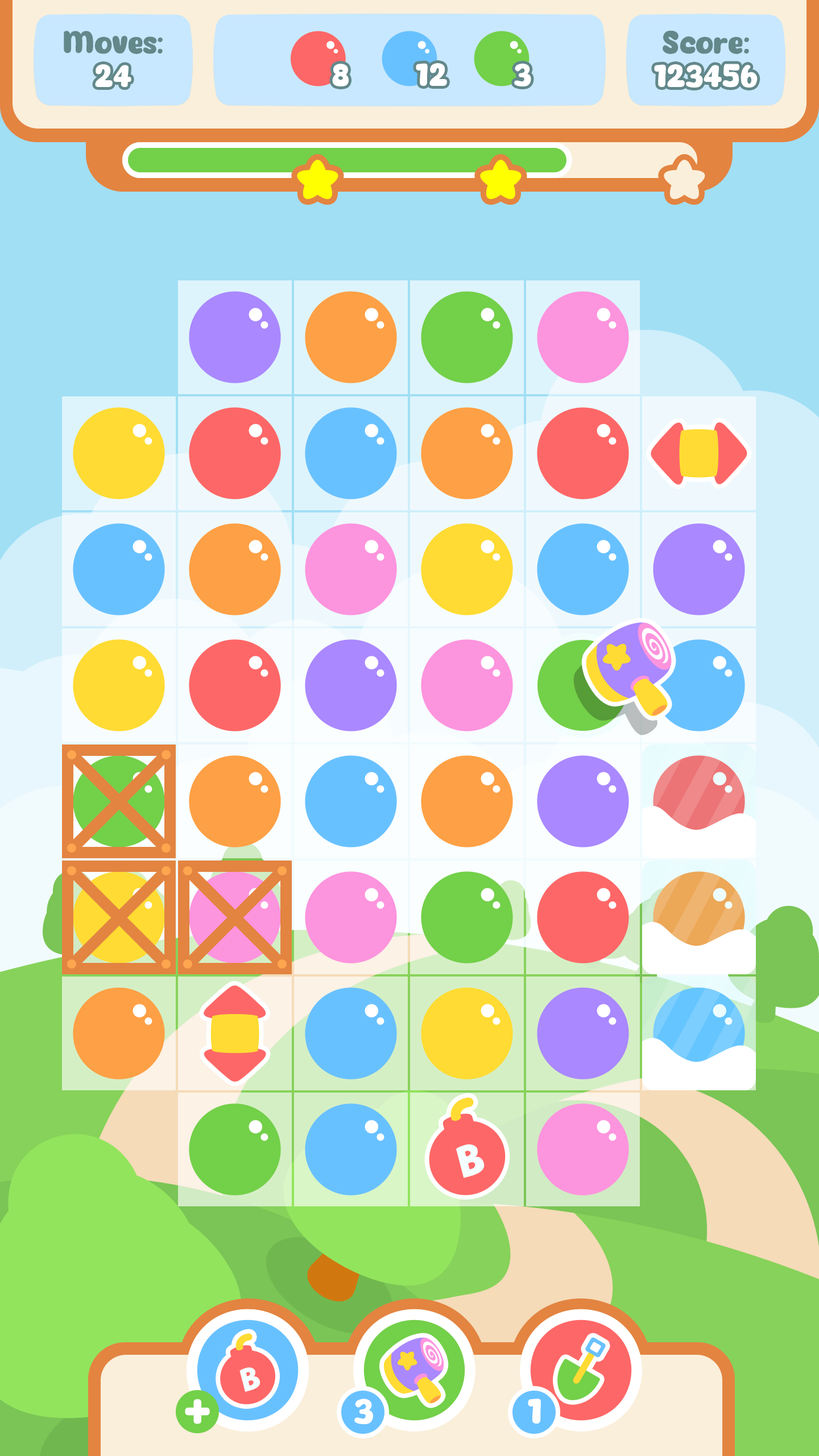
<style>
.page{position:relative;width:819px;height:1456px}
.page>*{position:absolute;margin:0}
.t1{font:30.7px "Eazy-Chat";color:#62888a}
.t2{font:30.7px "Eazy-Chat";color:#ffffff}
.t3{font:34.1px "Eazy-Chat";color:#ffffff}
</style>
<div class="page">
<p class="t1" style="left:64px;top:31px;width:99px;height:23px">Moves:</p>
<p class="t1" style="left:663px;top:31px;width:86px;height:23px">Score:</p>
<p class="t2" style="left:95px;top:64px;width:36px;height:23px">24</p>
<p class="t2" style="left:332px;top:64px;width:17px;height:22px">8</p>
<p class="t2" style="left:416px;top:63px;width:31px;height:23px">12</p>
<p class="t2" style="left:514px;top:63px;width:17px;height:23px">3</p>
<p class="t2" style="left:654px;top:64px;width:104px;height:24px">123456</p>
<p class="t3" style="left:354px;top:1399px;width:19px;height:25px">3</p>
<p class="t3" style="left:528px;top:1399px;width:13px;height:25px">1</p>
</div>
